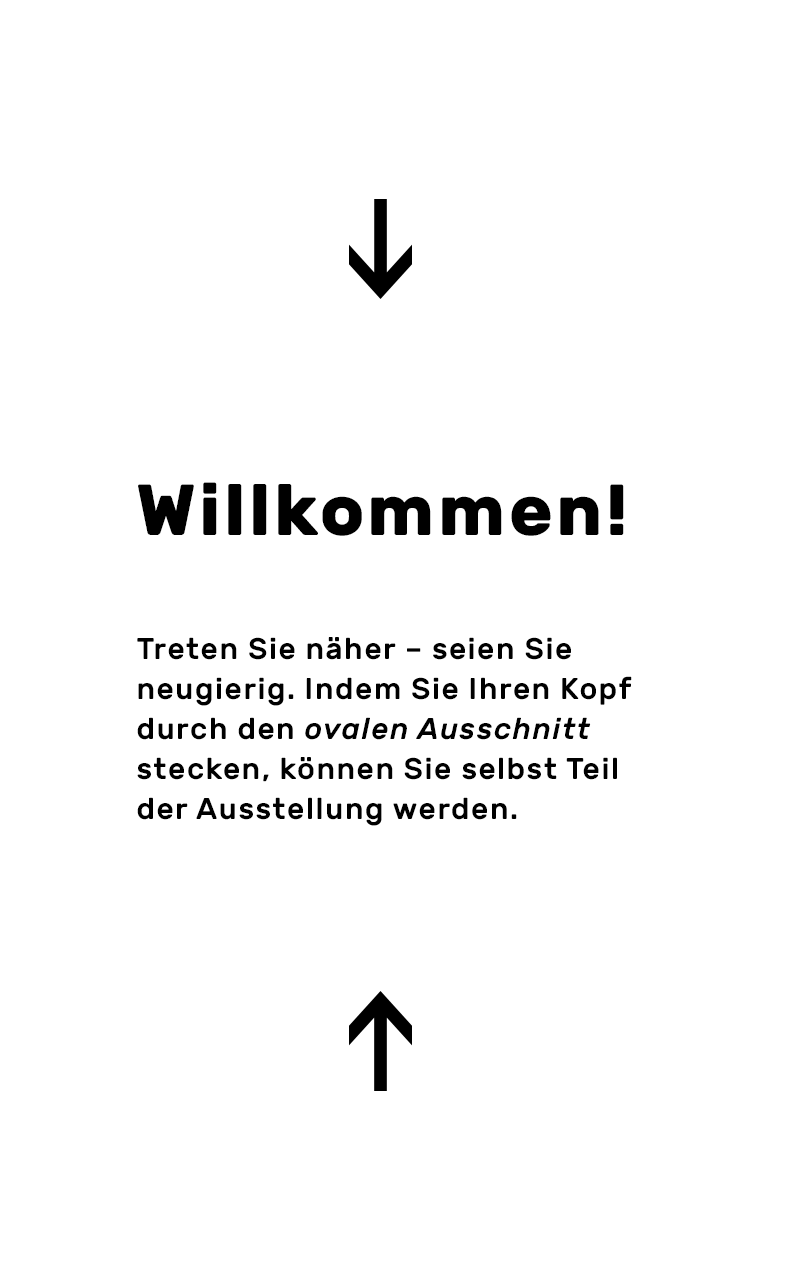
<style>
.page{position:relative;width:800px;height:1280px;background:#ffffff}
.page>*{position:absolute;margin:0}
.t1{font:72px "Rubik-Bold";letter-spacing:0.05em;color:#000000}
.t2{font:30px/40px "Rubik-Medium";letter-spacing:0.05em;color:#000000}
.t3{font:30px/40px "Rubik-MediumItalic";letter-spacing:0.05em;color:#000000}
</style>
<div class="page">
<p class="t1" style="left:138px;top:482px;width:486px;height:54px">Willkommen!</p>
<p class="t2" style="left:137px;top:637px;width:495px;height:189px;text-align:justify">Treten Sie näher – seien Sie <br>neugierig. Indem Sie Ihren Kopf<br>durch den <span class="t3">ovalen Ausschnitt</span> <br>stecken, können Sie selbst Teil <br>der Ausstellung werden.</p>
</div>
